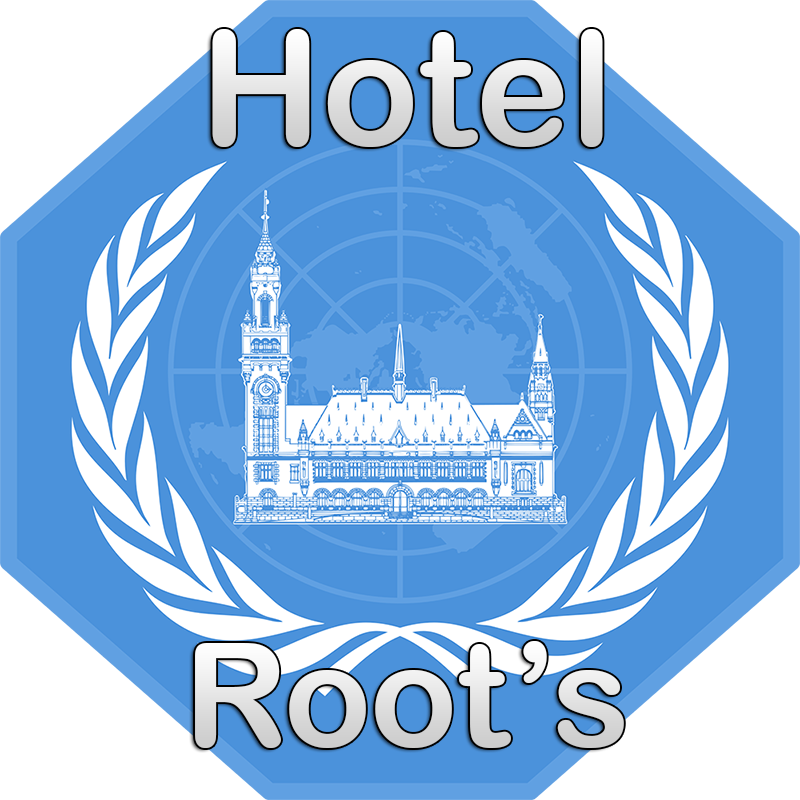
<style>
.page{position:relative;width:800px;height:800px;background:#4b92db}
.page>*{position:absolute;margin:0}
.t1{font:160px "ArialRoundedMTBold";color:#e3e3e3}
.t2{font:144px "ArialRoundedMTBold";color:#e2e2e2}
</style>
<div class="page">
<p class="t1" style="left:212px;top:29px;width:391px;height:118px">Hotel</p>
<p class="t2" style="left:195px;top:641px;width:429px;height:107px">Root’s</p>
</div>
